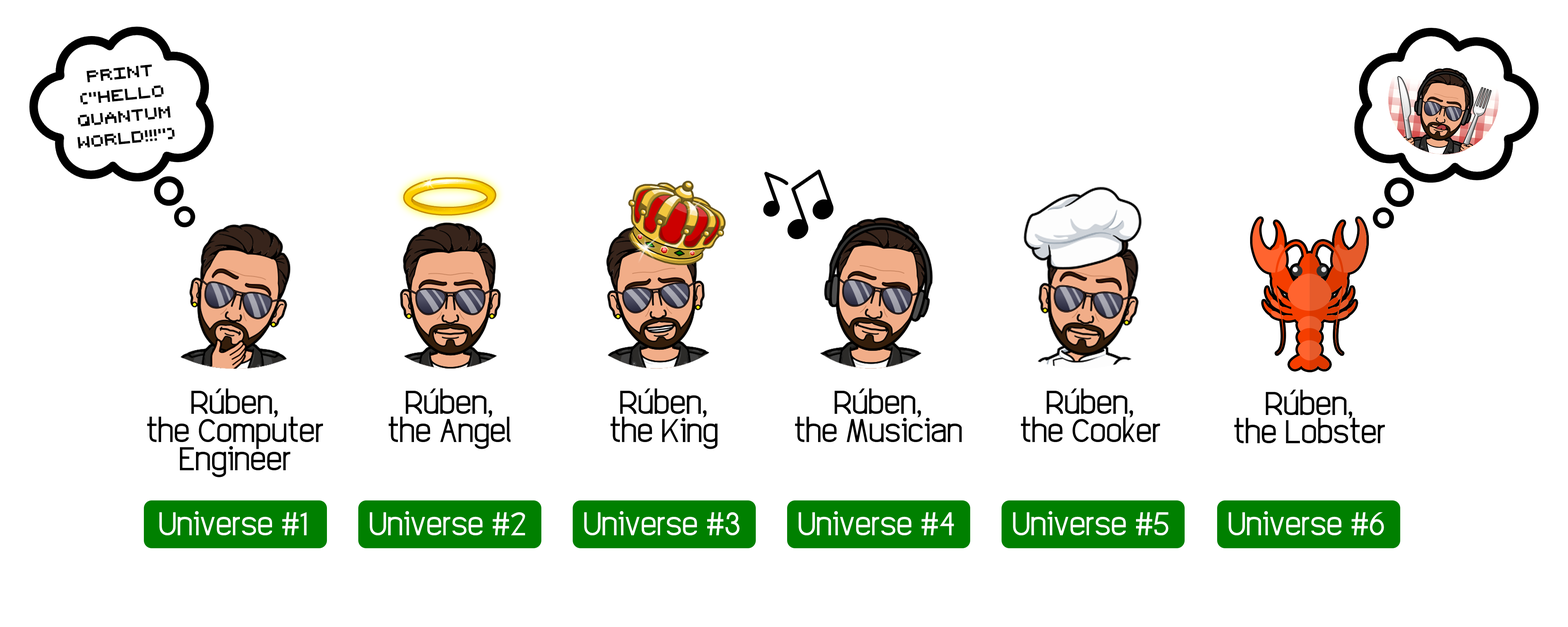
<style>
.page{position:relative;width:1568px;height:627px;background:#ffffff}
.page>*{position:absolute;margin:0}
.t1{font:18px "8_bit_1_6";color:#000000}
.t2{font:23.5px "EleganTech";color:#000000}
.t3{font:23.5px "EleganTech";color:#ffffff}
</style>
<div class="page">
<p class="t1" style="left:77px;top:64px;width:98px;height:85px;text-align:center;rotate:-6deg">print<br>(”Hello Quantum<br>World!!!”)</p>
<p class="t2" style="left:147px;top:388px;width:176px;height:89px;text-align:center">Rúben,<br>the Computer<br>Engineer</p>
<p class="t2" style="left:388px;top:388px;width:123px;height:61px;text-align:center">Rúben,<br>the Angel</p>
<p class="t2" style="left:610px;top:388px;width:108px;height:61px;text-align:center">Rúben,<br>the King</p>
<p class="t2" style="left:795px;top:388px;width:167px;height:54px;text-align:center">Rúben,<br>the Musician</p>
<p class="t2" style="left:1021px;top:388px;width:139px;height:54px;text-align:center">Rúben,<br>the Cooker</p>
<p class="t2" style="left:1234px;top:390px;width:151px;height:53px;text-align:center">Rúben,<br>the Lobster</p>
<p class="t3" style="left:159px;top:511px;width:148px;height:24px">Universe #1</p>
<p class="t3" style="left:370px;top:511px;width:155px;height:24px">Universe #2</p>
<p class="t3" style="left:584px;top:511px;width:156px;height:24px">Universe #3</p>
<p class="t3" style="left:799px;top:511px;width:155px;height:24px">Universe #4</p>
<p class="t3" style="left:1013px;top:511px;width:156px;height:24px">Universe #5</p>
<p class="t3" style="left:1229px;top:511px;width:155px;height:24px">Universe #6</p>
</div>
